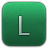
<style>
.page{position:relative;width:48px;height:48px}
.page>*{position:absolute;margin:0}
.t1{font:28px "MyriadPro-Regular";color:#9cb6ae}
</style>
<div class="page">
<p class="t1" style="left:19px;top:16px;width:11px;height:19px">L</p>
</div>
